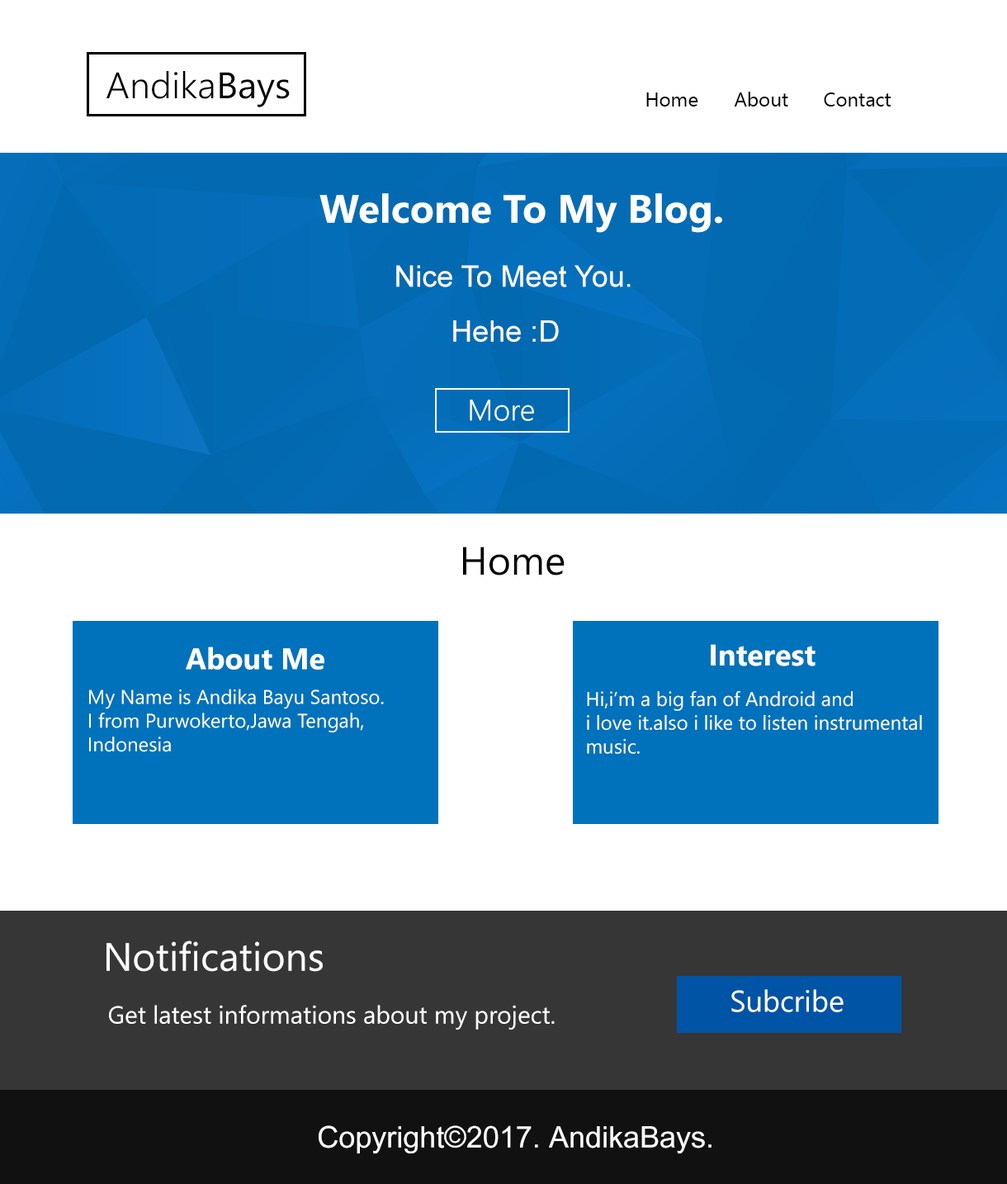
<style>
.page{position:relative;width:1007px;height:1184px;background:#ffffff}
.page>*{position:absolute;margin:0}
.t1{font:36.8px "LeelawadeeUI-Semilight";color:#000000}
.t2{font:36.8px "LeelawadeeUI";color:#000000}
.t3{font:19.8px "LeelawadeeUI";color:#000000}
.t4{font:39.6px "LeelawadeeUI-Bold";color:#fefefe}
.t5{font:29.7px "ArialMT";color:#fefefe}
.t6{font:29.7px "LeelawadeeUI-Semilight";color:#fefefe}
.t7{font:39.6px "LeelawadeeUI";color:#000000}
.t8{font:29.7px "LeelawadeeUI-Bold";color:#fefefe}
.t9{font:19.8px "LeelawadeeUI";color:#fefefe}
.t10{font:39.6px "LeelawadeeUI";color:#ffffff}
.t11{font:29.7px "LeelawadeeUI";color:#ffffff}
.t12{font:24.8px "LeelawadeeUI";color:#ffffff}
.t13{font:29.7px "ArialUnicodeMS";color:#ffffff}
</style>
<div class="page">
<p class="t1" style="left:107px;top:71px;width:183px;height:36px">Andika<span class="t2">Bays</span></p>
<p class="t3" style="left:646px;top:92px;width:246px;height:15px">Home  About  Contact</p>
<p class="t4" style="left:320px;top:193px;width:402px;height:40px">Welcome To My Blog.</p>
<p class="t5" style="left:396px;top:265px;width:235px;height:22px">Nice To Meet You.</p>
<p class="t5" style="left:453px;top:320px;width:106px;height:22px">Hehe :D</p>
<p class="t6" style="left:470px;top:400px;width:64px;height:21px">More</p>
<p class="t7" style="left:463px;top:547px;width:102px;height:28px">Home</p>
<p class="t8" style="left:186px;top:646px;width:138px;height:24px">About Me</p>
<p class="t8" style="left:711px;top:644px;width:105px;height:22px">Interest</p>
<p class="t9" style="left:89px;top:689px;width:295px;height:63px">My Name is Andika Bayu Santoso. <br>I from Purwokerto,Jawa Tengah,<br>Indonesia</p>
<p class="t9" style="left:587px;top:691px;width:335px;height:63px">Hi,i’m a big fan of Android and<br>i love it.also i like to listen instrumental <br>music.</p>
<p class="t10" style="left:107px;top:940px;width:216px;height:32px">Notifications</p>
<p class="t11" style="left:731px;top:989px;width:113px;height:23px">Subcribe</p>
<p class="t12" style="left:109px;top:1005px;width:446px;height:25px">Get latest informations about my project.</p>
<p class="t13" style="left:319px;top:1125px;width:393px;height:28px">Copyright©2017. AndikaBays.</p>
</div>
